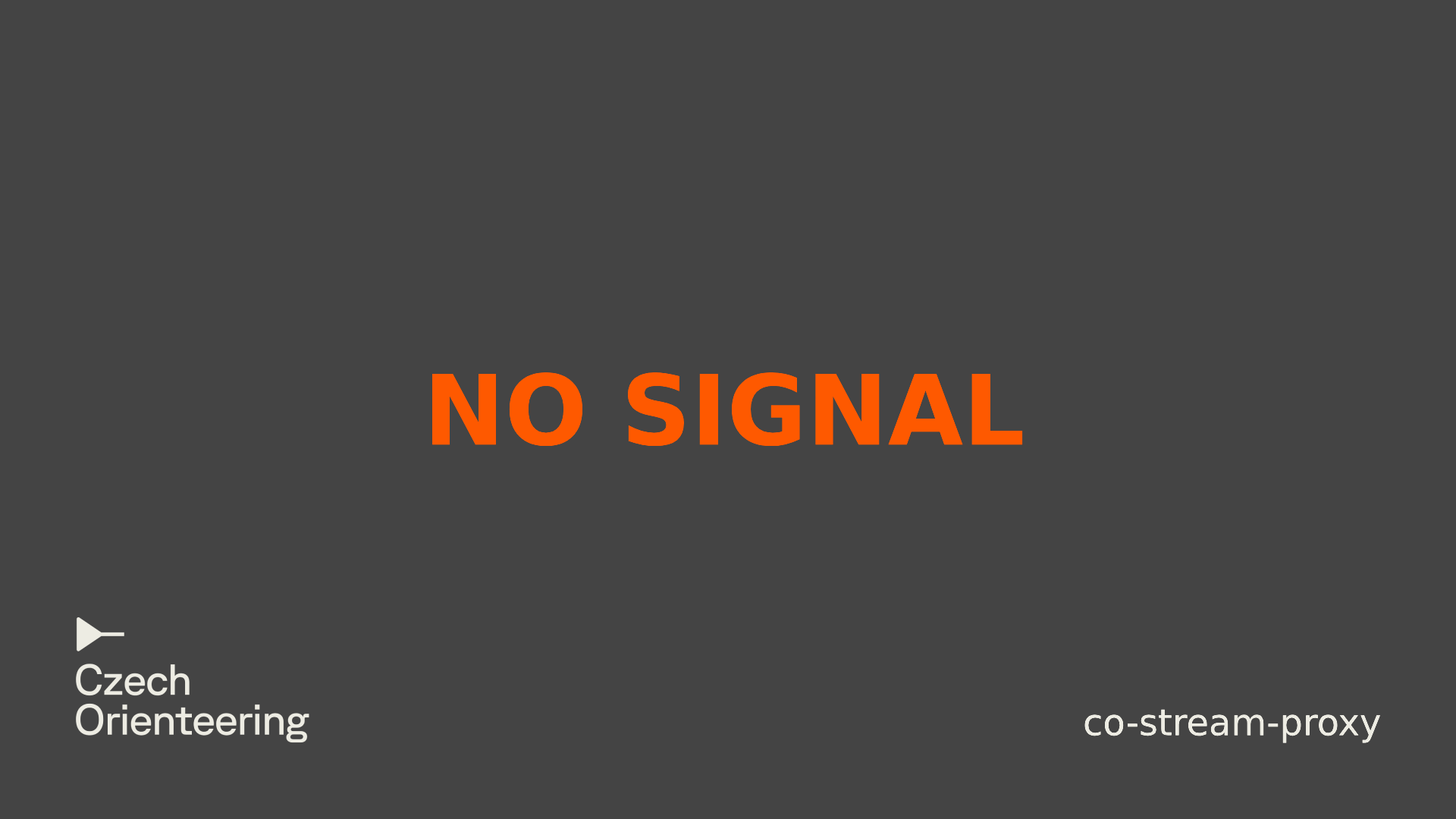
<style>
.page{position:relative;width:1456px;height:819px;background:#444444}
.page>*{position:absolute;margin:0}
.t1{font:97.1px "DejaVuSans-Bold";color:#fe5900}
.t2{font:36.4px "DejaVuSans";color:#edece3}
</style>
<div class="page">
<p class="t1" style="left:432px;top:372px;width:591px;height:75px">NO SIGNAL</p>
<p class="t2" style="left:1084px;top:709px;width:296px;height:34px">co-stream-proxy</p>
</div>
